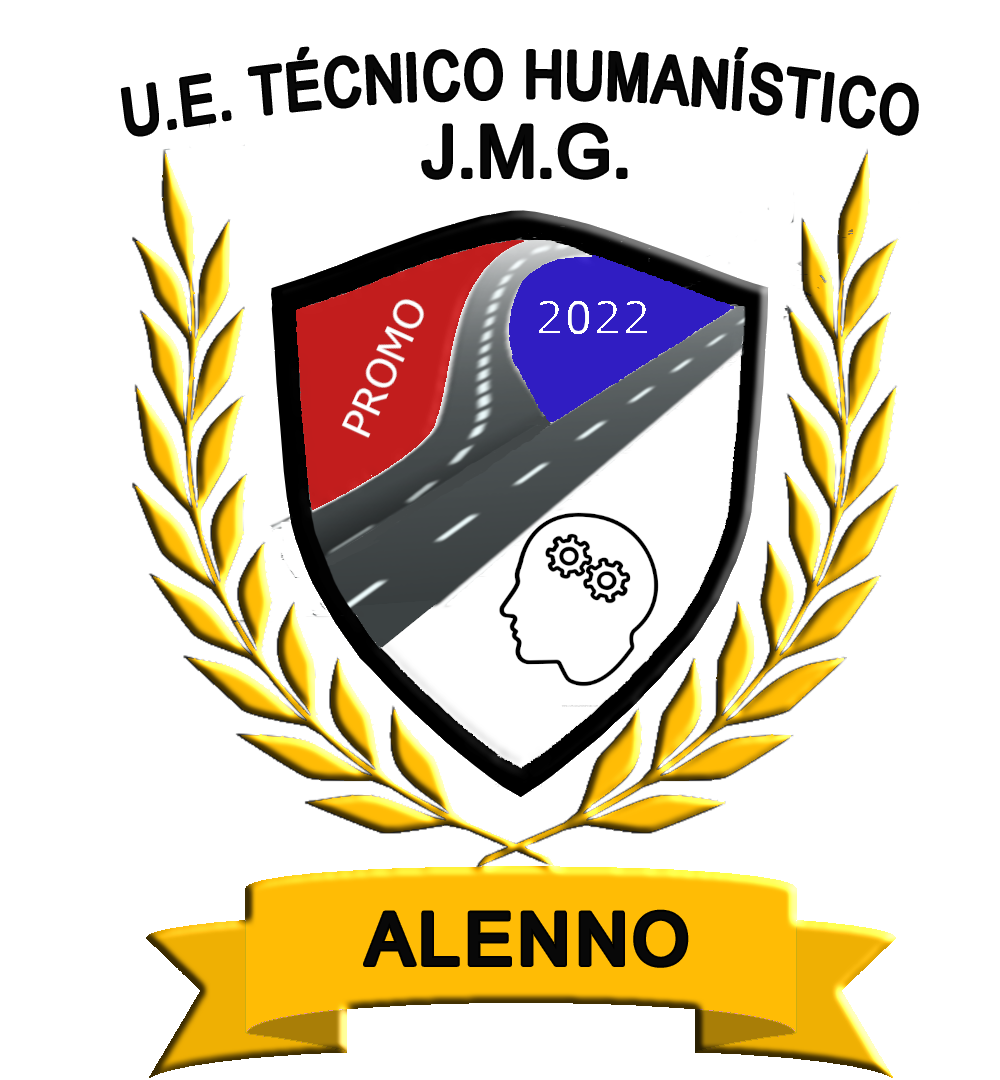
<style>
.page{position:relative;width:1000px;height:1080px;background:#ffffff}
.page>*{position:absolute;margin:0}
.t1{font:65px "ArialMT";letter-spacing:0.05em;color:#080808;scale:0.8 1}
.t2{font:72px "ArialMT";color:#080808}
.t3{font:71.7px "ArialMT";letter-spacing:0.05em;color:#080808;font-weight:bold}
</style>
<div class="page">
<p class="t1" style="left:122px;top:48px;width:795px;height:87px">U.E. TÉCNICO HUMANÍSTICO</p>
<p class="t2" style="left:423px;top:124px;width:203px;height:54px">J.M.G.</p>
<p class="t3" style="left:365px;top:911px;width:322px;height:55px">ALENNO</p>
</div>
